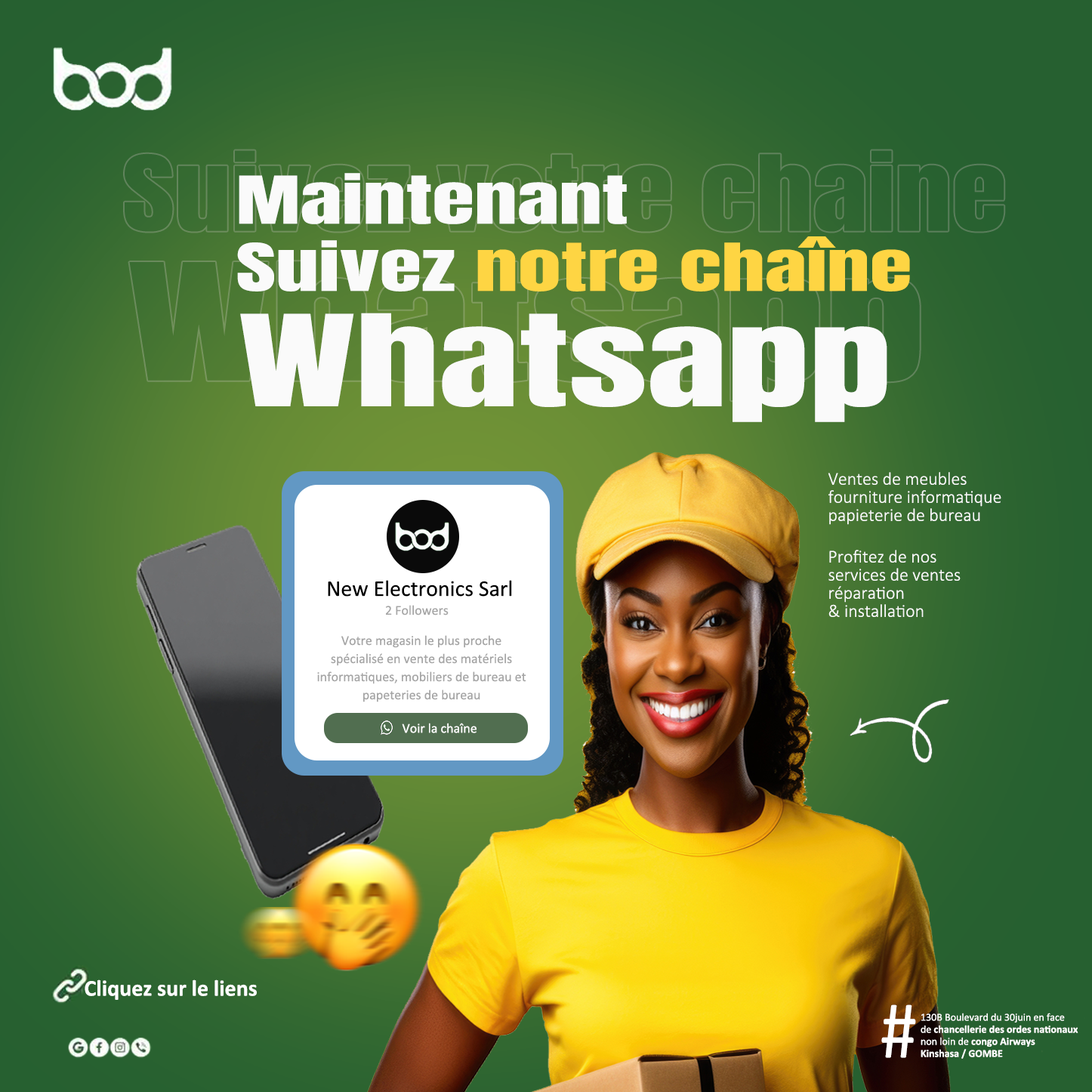
<style>
.page{position:relative;width:1092px;height:1092px}
.page>*{position:absolute;margin:0}
.t1{font:55.8px/67.2px "Anton-Regular";color:#fafafa;scale:1.55 1}
.t2{font:55.8px/67.2px "Anton-Regular";color:#fed543;scale:1.55 1}
.t3{font:107.5px "Anton-Regular";color:#fafafa;scale:1.53 1}
.t4{font:18.1px/18.1px "Calibri-Light";color:#fafafa}
.t5{font:22.7px "Calibri";color:#000000}
.t6{font:13.6px "Calibri";color:#a5a5a5}
.t7{font:13.6px/18.1px "Calibri";color:#a5a5a5}
.t8{font:13.6px "Calibri";color:#ffffff}
.t9{font:22.8px "Calibri-Bold";color:#ffffff}
.t10{font:82.5px "Calibri";color:#ffffff;scale:0.88 1}
.t11{font:10.6px/12.1px "Calibri";color:#ffffff}
.t12{font:10.6px/12.1px "Calibri-Bold";color:#ffffff}
</style>
<div class="page">
<p class="t1" style="left:237px;top:173px;width:673px;height:118px">Maintenant <br>Suivez <span class="t2">notre chaîne</span></p>
<p class="t3" style="left:240px;top:313px;width:647px;height:109px">Whatsapp</p>
<p class="t4" style="left:828px;top:472px;width:173px;height:53px">Ventes de meubles fourniture informatique papieterie de bureau</p>
<p class="t4" style="left:828px;top:550px;width:133px;height:67px">Profitez de nos services de ventes réparation                 &amp; installation</p>
<p class="t5" style="left:328px;top:580px;width:184px;height:17px">New Electronics Sarl</p>
<p class="t6" style="left:386px;top:605px;width:63px;height:10px">2 Followers</p>
<p class="t7" style="left:317px;top:635px;width:209px;height:67px;text-align:center">Votre magasin le plus proche spécialisé en vente des matériels informatiques, mobiliers de bureau et papeteries de bureau</p>
<p class="t8" style="left:402px;top:723px;width:75px;height:10px">Voir la chaîne</p>
<p class="t9" style="left:85px;top:979px;width:172px;height:21px">Cliquez sur le liens</p>
<p class="t10" style="left:881px;top:1004px;width:35px;height:54px">#</p>
<p class="t11" style="left:921px;top:1013px;width:157px;height:46px">130B Boulevard du 30juin en face   de <span class="t12">chancellerie des ordes nationaux</span> non loin de <span class="t12">congo Airways<br>Kinshasa / GOMBE</span></p>
</div>
